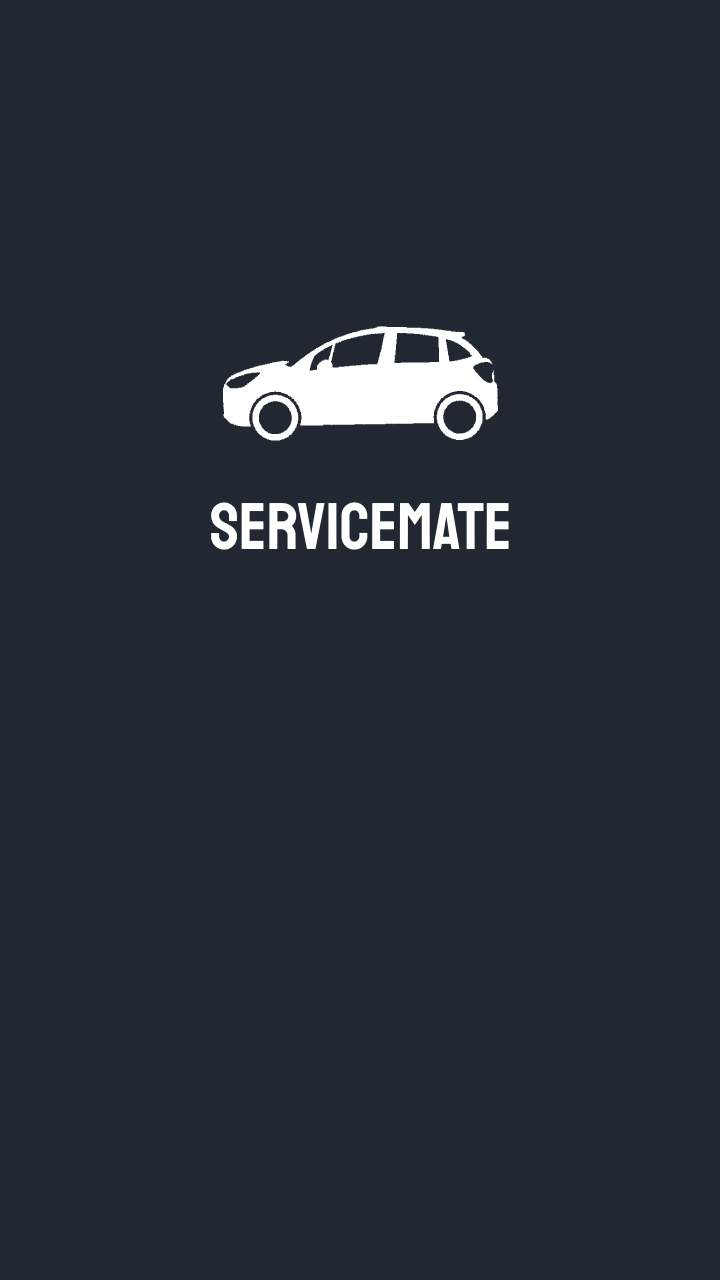
<style>
.page{position:relative;width:720px;height:1280px;background:#222831}
.page>*{position:absolute;margin:0}
.t1{font:66px "Staatliches-Regular";color:#ffffff}
</style>
<div class="page">
<p class="t1" style="left:211px;top:502px;width:298px;height:48px">SERVICEMATE</p>
</div>
